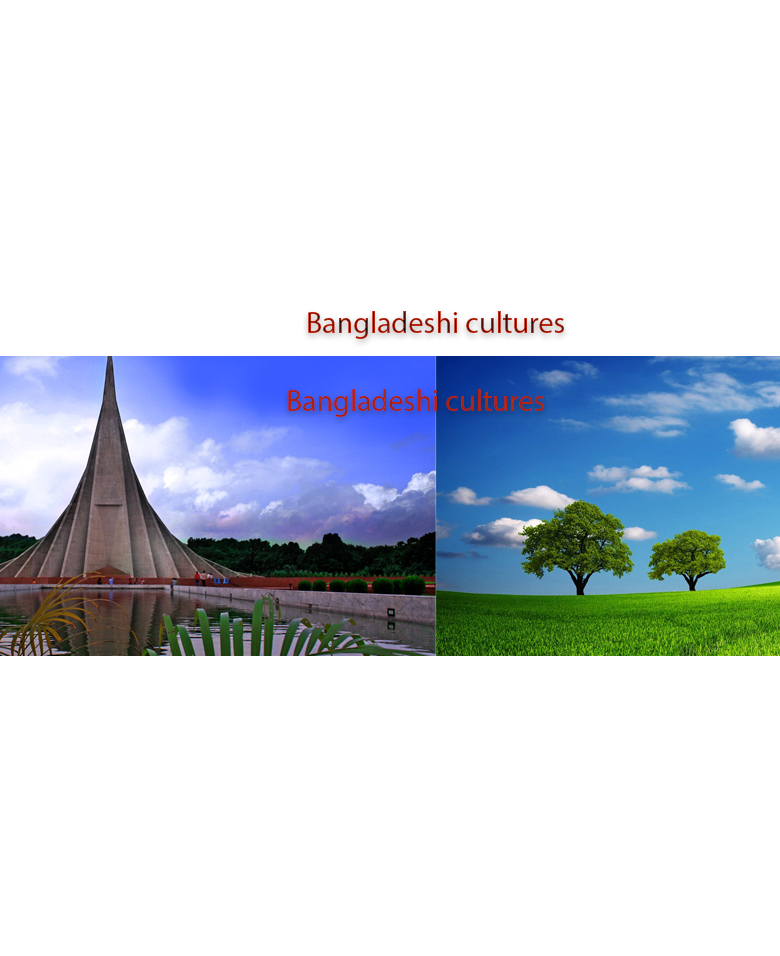
<style>
.page{position:relative;width:780px;height:956px;background:#ffffff}
.page>*{position:absolute;margin:0}
.t1{font:30px "MyriadPro-Regular"}
.t2{font:30px "MyriadPro-Regular";color:#aa2314}
</style>
<div class="page">
<p class="t1" style="left:308px;top:311px;width:256px;height:28px">Bangladeshi cultures</p>
<p class="t2" style="left:288px;top:389px;width:256px;height:28px">Bangladeshi cultures</p>
</div>
